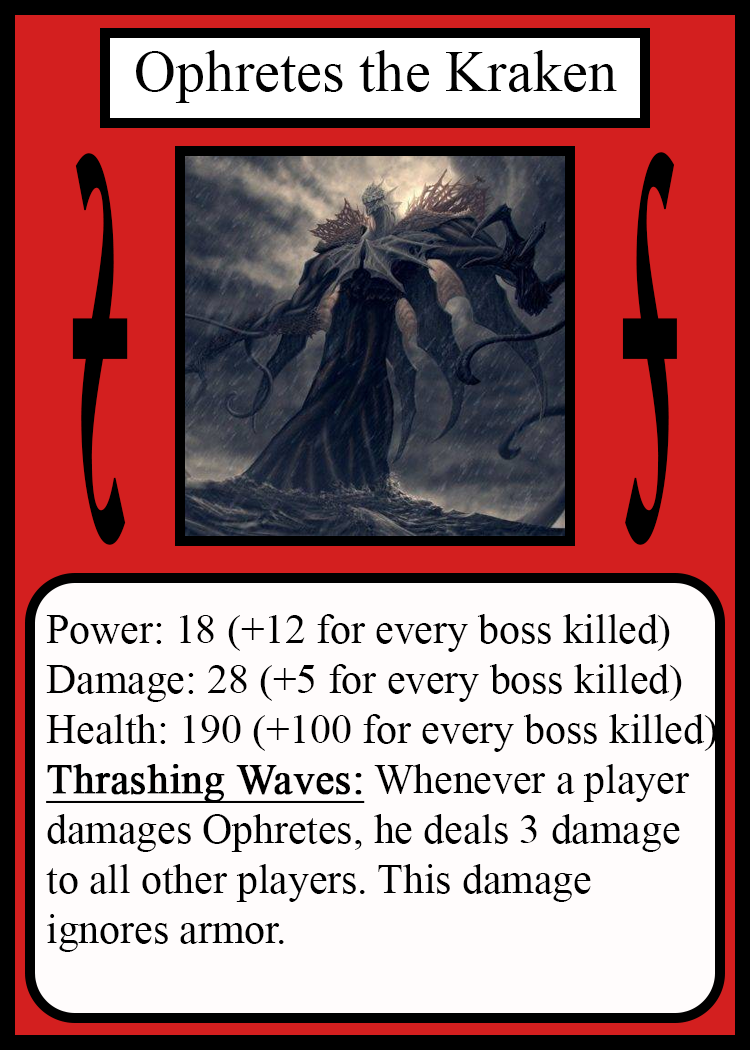
<style>
.page{position:relative;width:750px;height:1050px;background:#fffcfc}
.page>*{position:absolute;margin:0}
.t1{font:58.3px "TimesNewRomanPSMT";color:#010101}
.t2{font:814.3px "Apple-Chancery";color:#000000;font-weight:bold;scale:0.17 1}
.t3{font:814.6px "Apple-Chancery";color:#000000;font-weight:bold;scale:0.17 1}
.t4{font:41.7px "TimesNewRomanPSMT";color:#000000}
.t5{font:41.7px "TimesNewRomanPSMT";color:#000000;font-weight:bold;text-decoration:underline}
</style>
<div class="page">
<p class="t1" style="left:136px;top:50px;width:481px;height:53px">Ophretes the Kraken</p>
<p class="t2" style="left:72px;top:153px;width:56px;height:392px;rotate:180deg">s</p>
<p class="t3" style="left:622px;top:152px;width:55px;height:393px">s</p>
<p class="t4" style="left:46px;top:614px;width:671px;height:338px">Power: 18 (+12 for every boss killed)<br>Damage: 28 (+5 for every boss killed)<br>Health: 190 (+100 for every boss killed)<br><span class="t5">Thrashing Waves:</span> Whenever a player<br>damages Ophretes, he deals 3 damage <br>to all other players. This damage<br>ignores armor.</p>
</div>
